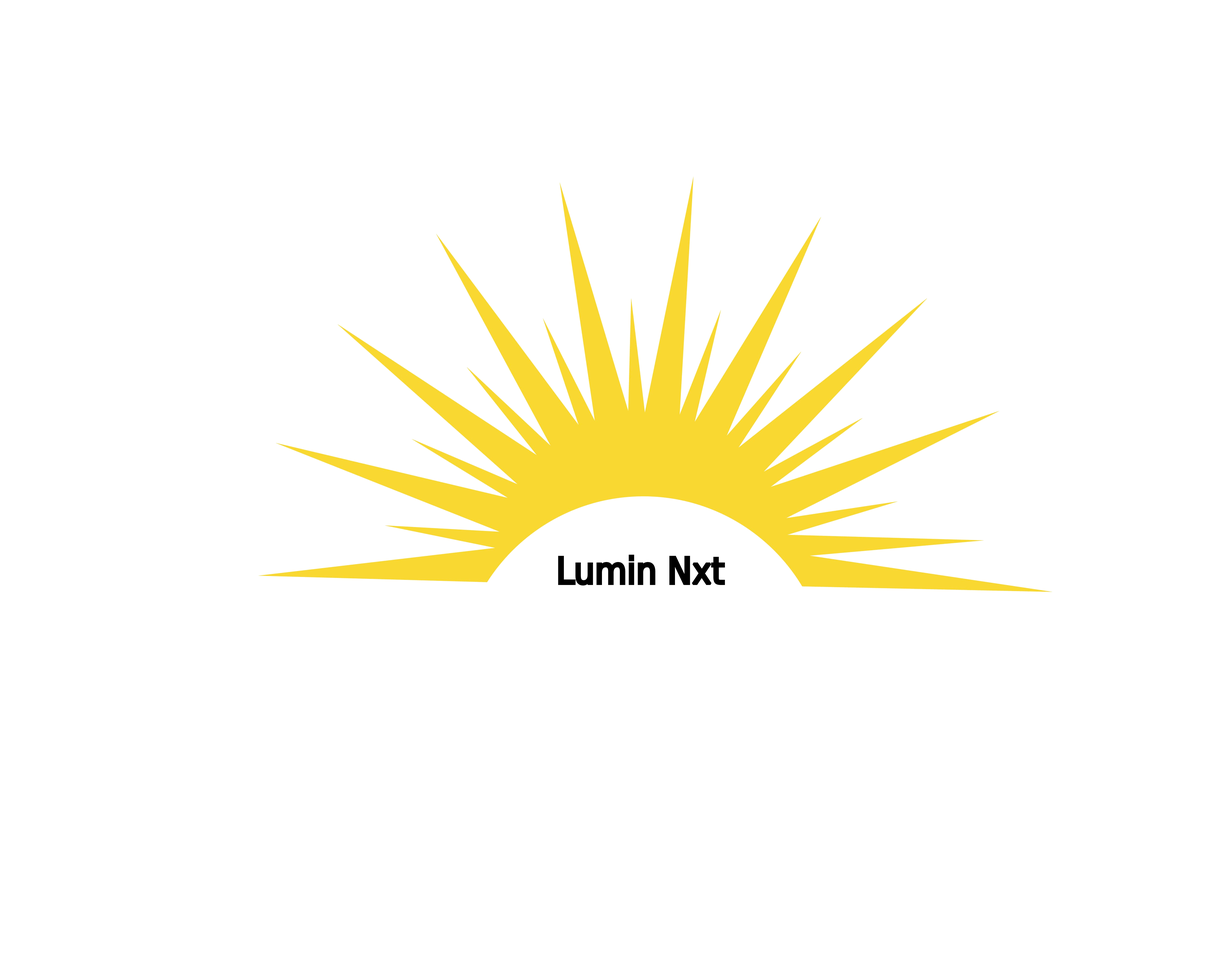
<style>
.page{position:relative;width:1221px;height:977px;background:#ffffff}
.page>*{position:absolute;margin:0}
.t1{font:36.6px "DejaVuSansCondensed";color:#000000}
</style>
<div class="page">
<p class="t1" style="left:558px;top:555px;width:167px;height:31px">Lumin Nxt</p>
</div>
